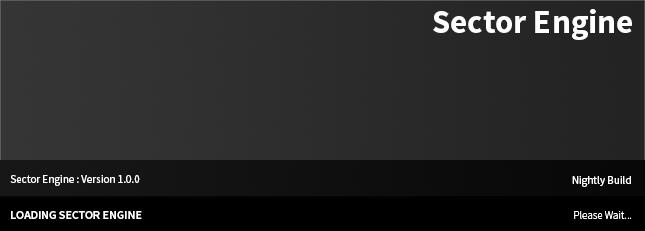
<style>
.page{position:relative;width:645px;height:231px}
.page>*{position:absolute;margin:0}
.t1{font:33.3px "SourceSansPro-Bold";color:#ffffff}
.t2{font:11.1px "SourceSansPro-Regular";color:#ffffff}
.t3{font:12px "SourceSansPro-Semibold";color:#ffffff}
.t4{font:11.1px "SourceSansPro-Light";color:#ffffff}
</style>
<div class="page">
<p class="t1" style="left:433px;top:9px;width:199px;height:31px">Sector Engine</p>
<p class="t2" style="left:10px;top:175px;width:130px;height:11px">Sector Engine : Version 1.0.0</p>
<p class="t2" style="left:572px;top:176px;width:59px;height:11px">Nightly Build</p>
<p class="t3" style="left:11px;top:211px;width:131px;height:8px">LOADING SECTOR ENGINE</p>
<p class="t4" style="left:574px;top:211px;width:58px;height:8px">Please Wait...</p>
</div>
